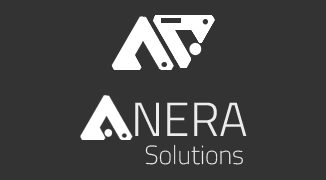
<style>
.page{position:relative;width:326px;height:180px;background:#333333}
.page>*{position:absolute;margin:0}
.t1{font:48px "TitilliumWeb-Light";color:#ececec}
.t2{font:26px "TitilliumWeb-ExtraLight";color:#ececec}
</style>
<div class="page">
<p class="t1" style="left:135px;top:102px;width:112px;height:34px">NERA</p>
<p class="t2" style="left:145px;top:144px;width:98px;height:21px">Solutions</p>
</div>
